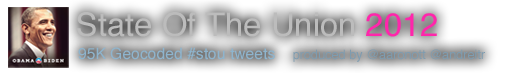
<style>
.page{position:relative;width:505px;height:73px}
.page>*{position:absolute;margin:0}
.t1{font:32.7px "Helvetica";color:#bcbcbc}
.t2{font:32.7px "Helvetica";color:#ff26ab}
.t3{font:12.7px "Helvetica";color:#7e9cb0}
.t4{font:15.7px "Helvetica";color:#8eb4cd}
</style>
<div class="page">
<p class="t1" style="left:77px;top:12px;width:360px;height:25px">State Of The Union <span class="t2">2012</span></p>
<p class="t3" style="left:78px;top:47px;width:407px;height:15px"><span class="t4">95K Geocoded #stou tweets    </span>produced by @aaronott @andreitr</p>
</div>
